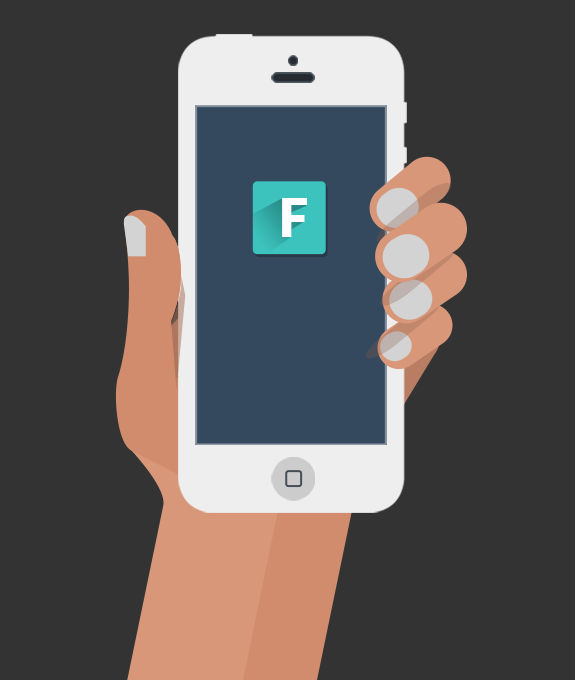
<style>
.page{position:relative;width:575px;height:680px;background:#333333}
.page>*{position:absolute;margin:0}
.t1{font:52.6px "Lato-Black";color:#ffffff}
</style>
<div class="page">
<p class="t1" style="left:282px;top:198px;width:25px;height:39px">F</p>
</div>
